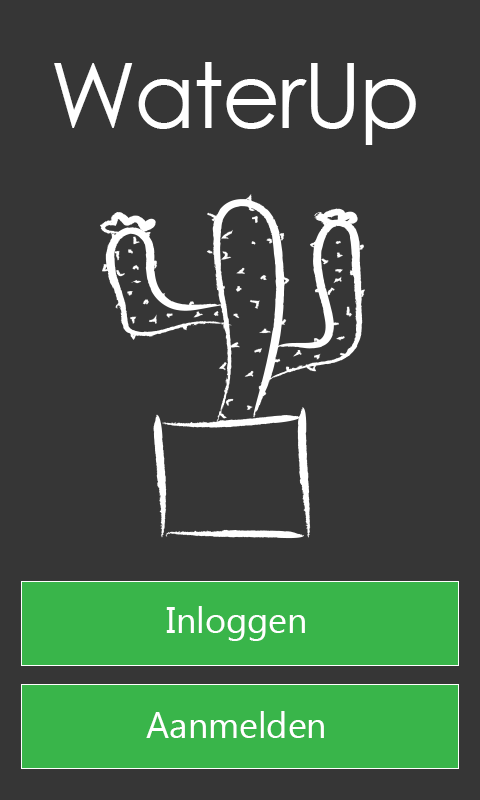
<style>
.page{position:relative;width:480px;height:800px;background:#363636}
.page>*{position:absolute;margin:0}
.t1{font:90px "CenturyGothic";letter-spacing:-0.025em;color:#ffffff}
.t2{font:36px "MyanmarText";color:#ffffff}
</style>
<div class="page">
<p class="t1" style="left:54px;top:62px;width:362px;height:83px">WaterUp</p>
<p class="t2" style="left:166px;top:606px;width:139px;height:35px">Inloggen</p>
<p class="t2" style="left:146px;top:711px;width:178px;height:27px">Aanmelden</p>
</div>
